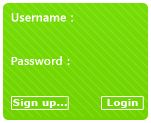
<style>
.page{position:relative;width:151px;height:123px}
.page>*{position:absolute;margin:0}
.t1{font:11px "MicrosoftJhengHeiBold";letter-spacing:0.02em;color:#ffffff}
.t2{font:10px "Verdana-Bold";letter-spacing:0.02em;color:#ffffff}
</style>
<div class="page">
<p class="t1" style="left:11px;top:13px;width:62px;height:9px">Username：</p>
<p class="t1" style="left:11px;top:56px;width:59px;height:9px">Password：</p>
<p class="t2" style="left:13px;top:99px;width:54px;height:9px">Sign up...</p>
<p class="t2" style="left:107px;top:99px;width:31px;height:9px">Login</p>
</div>
